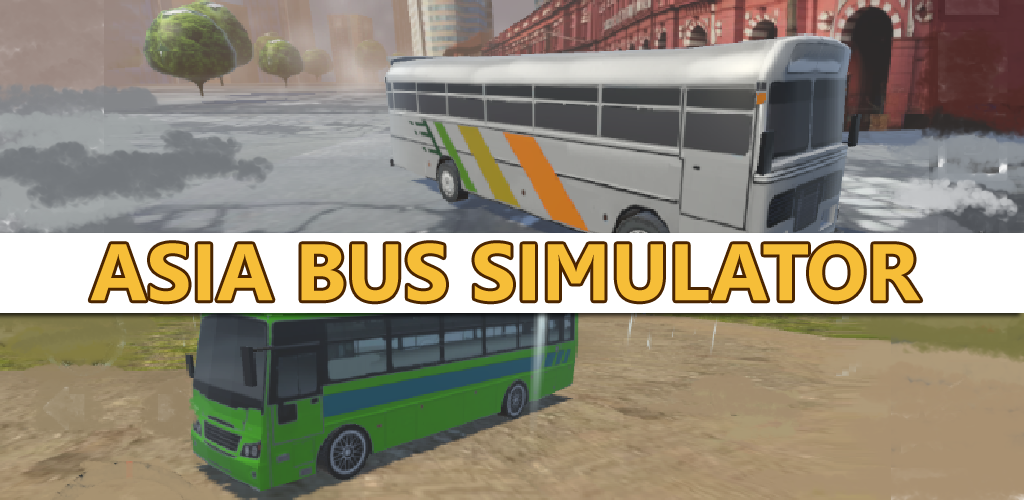
<style>
.page{position:relative;width:1024px;height:500px}
.page>*{position:absolute;margin:0}
.t1{font:80px "Gisha-Bold";color:#f6be38}
</style>
<div class="page">
<p class="t1" style="left:90px;top:243px;width:831px;height:59px">ASIA BUS SIMULATOR</p>
</div>
